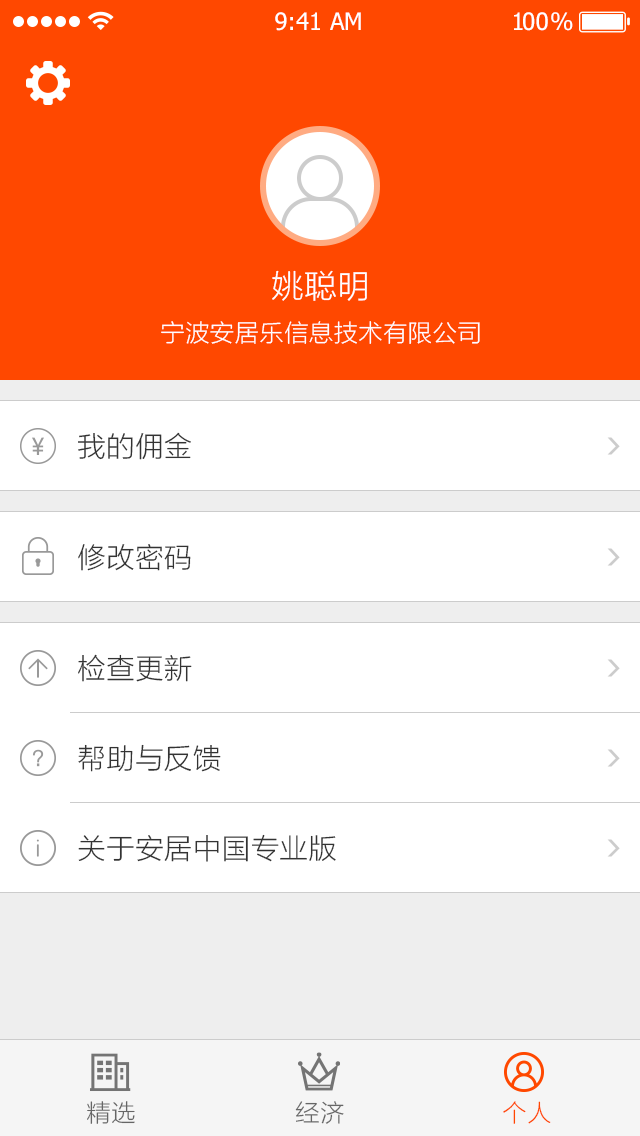
<style>
.page{position:relative;width:640px;height:1136px;background:#ffffff}
.page>*{position:absolute;margin:0}
.t1{font:24px "Tahoma";color:#ffffff}
.t2{font:24px "Tahoma";letter-spacing:-0.1em;color:#ffffff}
.t3{font:24px "Tahoma";letter-spacing:-0.25em;color:#ffffff}
.t4{font:32px "STHeitiSC-Light";color:#ffffff}
.t5{font:24px "STHeitiSC-Light";color:#ffffff}
.t6{font:28px "STHeitiSC-Light";color:#333333}
.t7{font:24px "STHeitiSC-Light";color:#666666}
.t8{font:24px "STHeitiSC-Light";color:#ff4800}
</style>
<div class="page">
<p class="t1" style="left:275px;top:12px;width:86px;height:19px">9:41 AM</p>
<p class="t2" style="left:514px;top:12px;width:59px;height:19px">1<span class="t1">0</span><span class="t3">0 </span>%</p>
<p class="t4" style="left:272px;top:270px;width:95px;height:31px">姚聪明</p>
<p class="t5" style="left:161px;top:321px;width:319px;height:23px">宁波安居乐信息技术有限公司</p>
<p class="t6" style="left:78px;top:432px;width:113px;height:28px">我的佣金</p>
<p class="t6" style="left:78px;top:544px;width:113px;height:27px">修改密码</p>
<p class="t6" style="left:78px;top:654px;width:114px;height:28px">检查更新</p>
<p class="t6" style="left:78px;top:744px;width:143px;height:28px">帮助与反馈</p>
<p class="t6" style="left:78px;top:834px;width:258px;height:28px">关于安居中国专业版</p>
<p class="t7" style="left:87px;top:1101px;width:48px;height:23px">精选</p>
<p class="t7" style="left:295px;top:1101px;width:49px;height:23px">经济</p>
<p class="t8" style="left:503px;top:1101px;width:48px;height:23px">个人</p>
</div>
